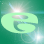
<style>
.page{position:relative;width:44px;height:44px;background:#adf9bc}
.page>*{position:absolute;margin:0}
.t1{font:34.8px "Ravie";color:#adf9bc;scale:1.52 1}
</style>
<div class="page">
<p class="t1" style="left:1px;top:12px;width:37px;height:22px;rotate:1deg">e</p>
</div>
